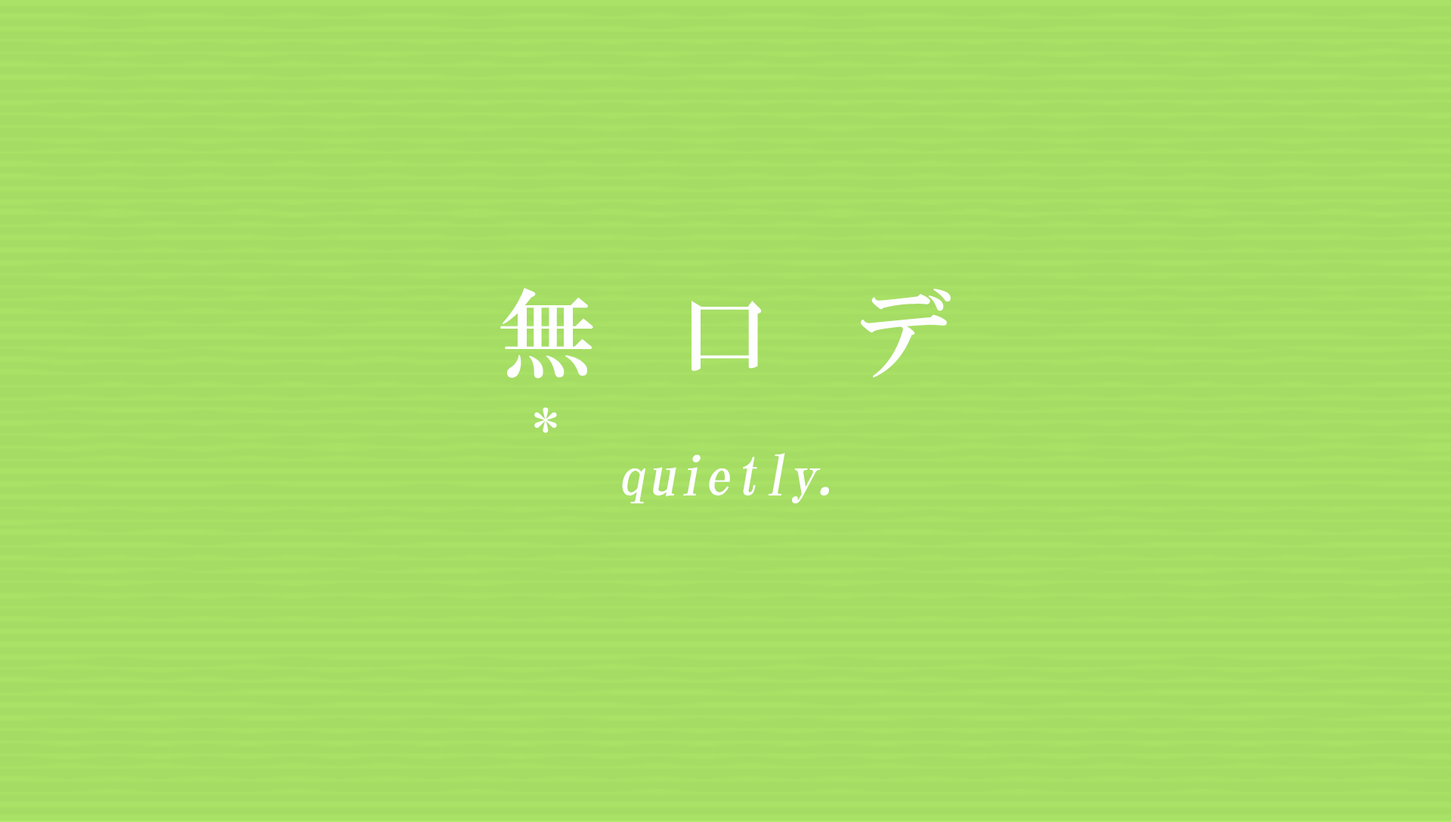
<style>
.page{position:relative;width:1451px;height:822px;background:#a5dc64}
.page>*{position:absolute;margin:0}
.t1{font:97.5px "HGMinchoB";letter-spacing:0.83em;color:#fefeff}
.t2{font:49.1px "HGMinchoB";letter-spacing:0.83em;color:#fefeff}
.t3{font:55.4px "HGMinchoB";letter-spacing:0.01em;color:#fefeff;font-style:italic}
</style>
<div class="page">
<p class="t1" style="left:500px;top:288px;width:450px;height:91px">無口デ</p>
<p class="t2" style="left:534px;top:407px;width:23px;height:26px">*</p>
<p class="t3" style="left:622px;top:453px;width:207px;height:51px">quietly.</p>
</div>
